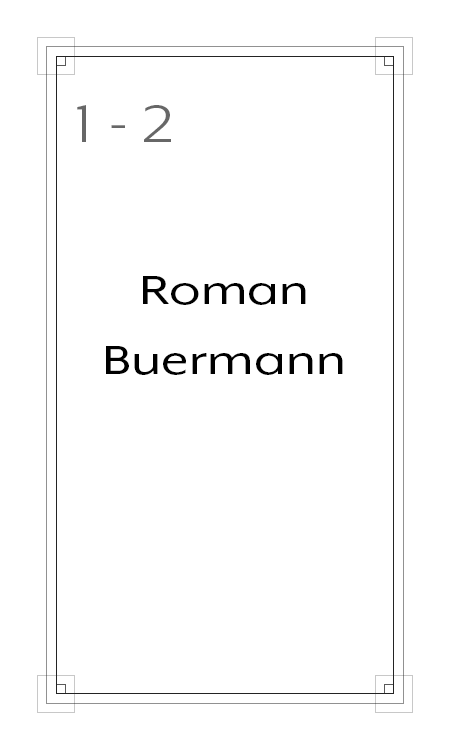
<style>
.page{position:relative;width:450px;height:750px;background:#ffffff}
.page>*{position:absolute;margin:0}
.t1{font:60px "MrEavesXLModOT-Book";color:#676767;scale:1.25 1}
.t2{font:46.7px "MrEavesXLModOT-Reg";color:#000000;scale:1.25 1}
</style>
<div class="page">
<p class="t1" style="left:77px;top:105px;width:94px;height:37px">1 - 2</p>
<p class="t2" style="left:106px;top:276px;width:237px;height:99px;text-align:center">Roman<br>Buermann</p>
</div>
